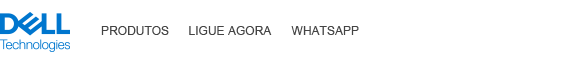
<style>
.page{position:relative;width:571px;height:61px;background:#ffffff}
.page>*{position:absolute;margin:0}
.t1{font:12px "ArialMT";color:#444444;text-transform:uppercase}
</style>
<div class="page">
<p class="t1" style="left:101px;top:26px;width:68px;height:9px">PRODUTOS</p>
<p class="t1" style="left:189px;top:26px;width:83px;height:9px">LIGUE AGORA</p>
<p class="t1" style="left:291px;top:26px;width:68px;height:9px">WHATSAPP</p>
</div>
